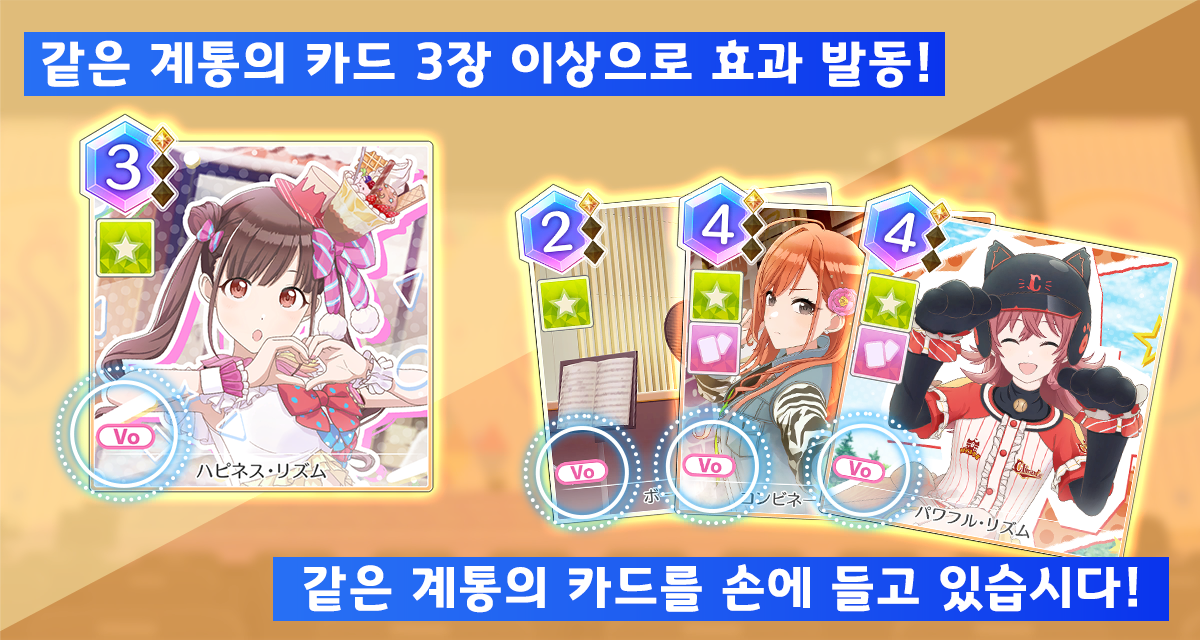
<style>
.page{position:relative;width:1200px;height:640px}
.page>*{position:absolute;margin:0}
.t1{font:50.7px "GyeonggiTitleB";letter-spacing:0.05em;color:#ffffff}
</style>
<div class="page">
<p class="t1" style="left:42px;top:39px;width:887px;height:49px">같은 계통의 카드 3장 이상으로 효과 발동!</p>
<p class="t1" style="left:304px;top:563px;width:834px;height:50px">같은 계통의 카드를 손에 들고 있습시다!</p>
</div>
